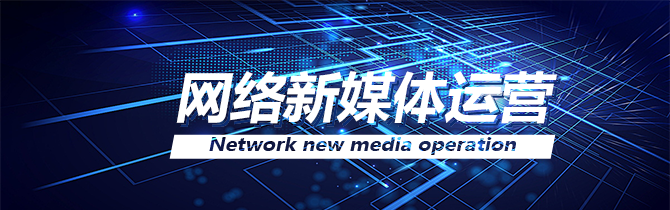
<style>
.page{position:relative;width:670px;height:210px}
.page>*{position:absolute;margin:0}
.t1{font:53.8px "MicrosoftYaHei-Bold";color:#ffffff;font-style:italic}
</style>
<div class="page">
<p class="t1" style="left:176px;top:71px;width:381px;height:53px">网络新媒体运营</p>
</div>
